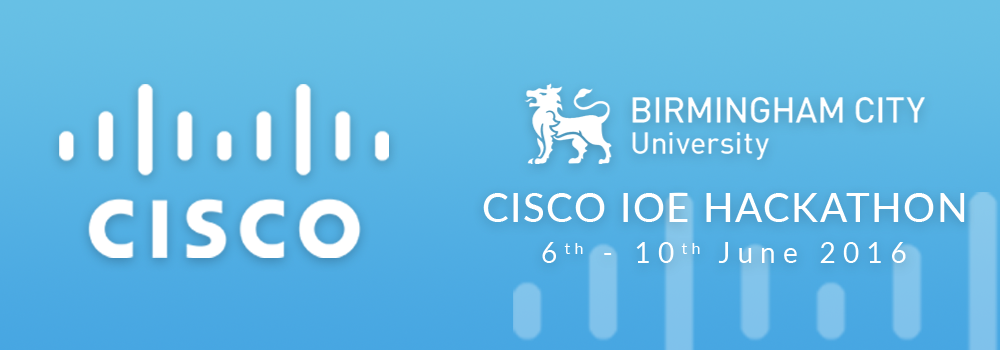
<style>
.page{position:relative;width:1000px;height:350px}
.page>*{position:absolute;margin:0}
.t1{font:40px "Lato-Medium";letter-spacing:0.04em;color:#ffffff}
.t2{font:28px "Lato-Regular";letter-spacing:0.26em;color:#ffffff}
</style>
<div class="page">
<p class="t1" style="left:483px;top:193px;width:482px;height:29px">CISCO IOE HACKATHON</p>
<p class="t2" style="left:542px;top:242px;width:364px;height:21px">6th - 10th June 2016</p>
</div>
